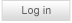
<style>
.page{position:relative;width:72px;height:23px}
.page>*{position:absolute;margin:0}
.t1{font:11px "ArialMT";color:#676767}
</style>
<div class="page">
<p class="t1" style="left:22px;top:6px;width:29px;height:11px">Log in</p>
</div>
